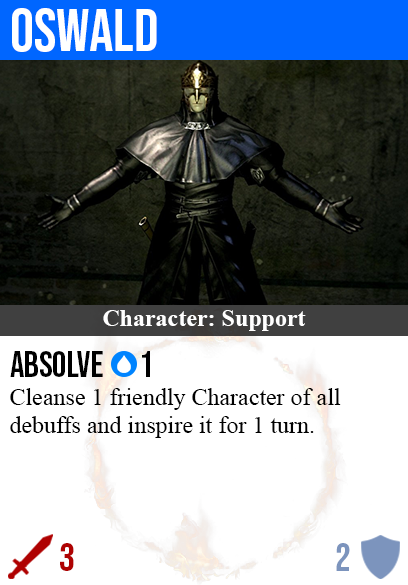
<style>
.page{position:relative;width:408px;height:585px;background:#ffffff}
.page>*{position:absolute;margin:0}
.t1{font:60px "BebasNeue-Regular";color:#ffffff}
.t2{font:24px "TimesNewRomanPS-BoldMT";color:#ffffff}
.t3{font:36px "BebasNeue-Regular";color:#000000}
.t4{font:24px "TimesNewRomanPSMT";color:#000000}
.t5{font:40px "BebasNeue-Regular";color:#af0202}
.t6{font:40px "BebasNeue-Regular";color:#7c94bd}
</style>
<div class="page">
<p class="t1" style="left:12px;top:8px;width:145px;height:44px">oswald</p>
<p class="t2" style="left:103px;top:310px;width:203px;height:21px">Character: Support</p>
<p class="t3" style="left:10px;top:351px;width:140px;height:26px">absolve      1</p>
<p class="t4" style="left:10px;top:388px;width:331px;height:50px">Cleanse 1 friendly Character of all<br>debuffs and inspire it for 1 turn.</p>
<p class="t5" style="left:60px;top:543px;width:14px;height:28px">3</p>
<p class="t6" style="left:336px;top:543px;width:14px;height:28px">2</p>
</div>
